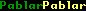
<style>
.page{position:relative;width:86px;height:11px;background:#000000}
.page>*{position:absolute;margin:0}
.t1{font:13.2px "Onesize";color:#009900;scale:0.91 1}
.t2{font:13.2px "Onesize";color:#ffff66;scale:0.91 1}
</style>
<div class="page">
<p class="t1" style="left:0px;top:1px;width:43px;height:8px">Pablar</p>
<p class="t2" style="left:43px;top:1px;width:43px;height:8px">Pablar</p>
</div>
